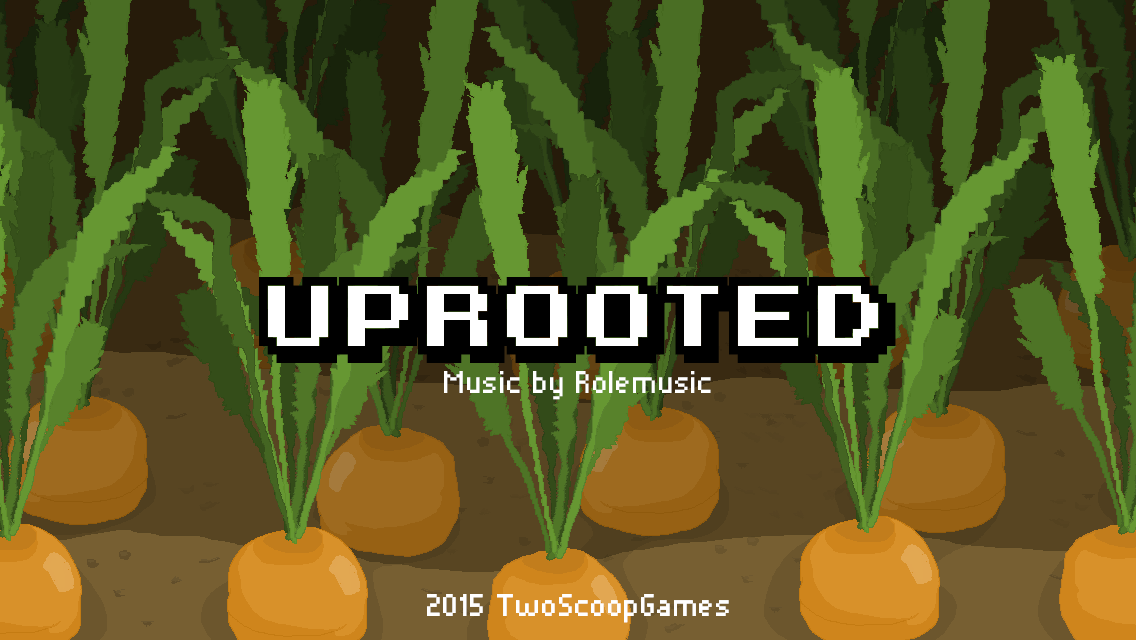
<style>
.page{position:relative;width:1136px;height:640px}
.page>*{position:absolute;margin:0}
.t1{font:40.6px "Pixelade";letter-spacing:0.02em;color:#ffffff}
</style>
<div class="page">
<p class="t1" style="left:444px;top:371px;width:267px;height:29px">Music by Rolemusic</p>
<p class="t1" style="left:427px;top:594px;width:302px;height:29px">2015 TwoScoopGames</p>
<p class="t1" style="left:427px;top:594px;width:302px;height:29px">2015 TwoScoopGames</p>
</div>
